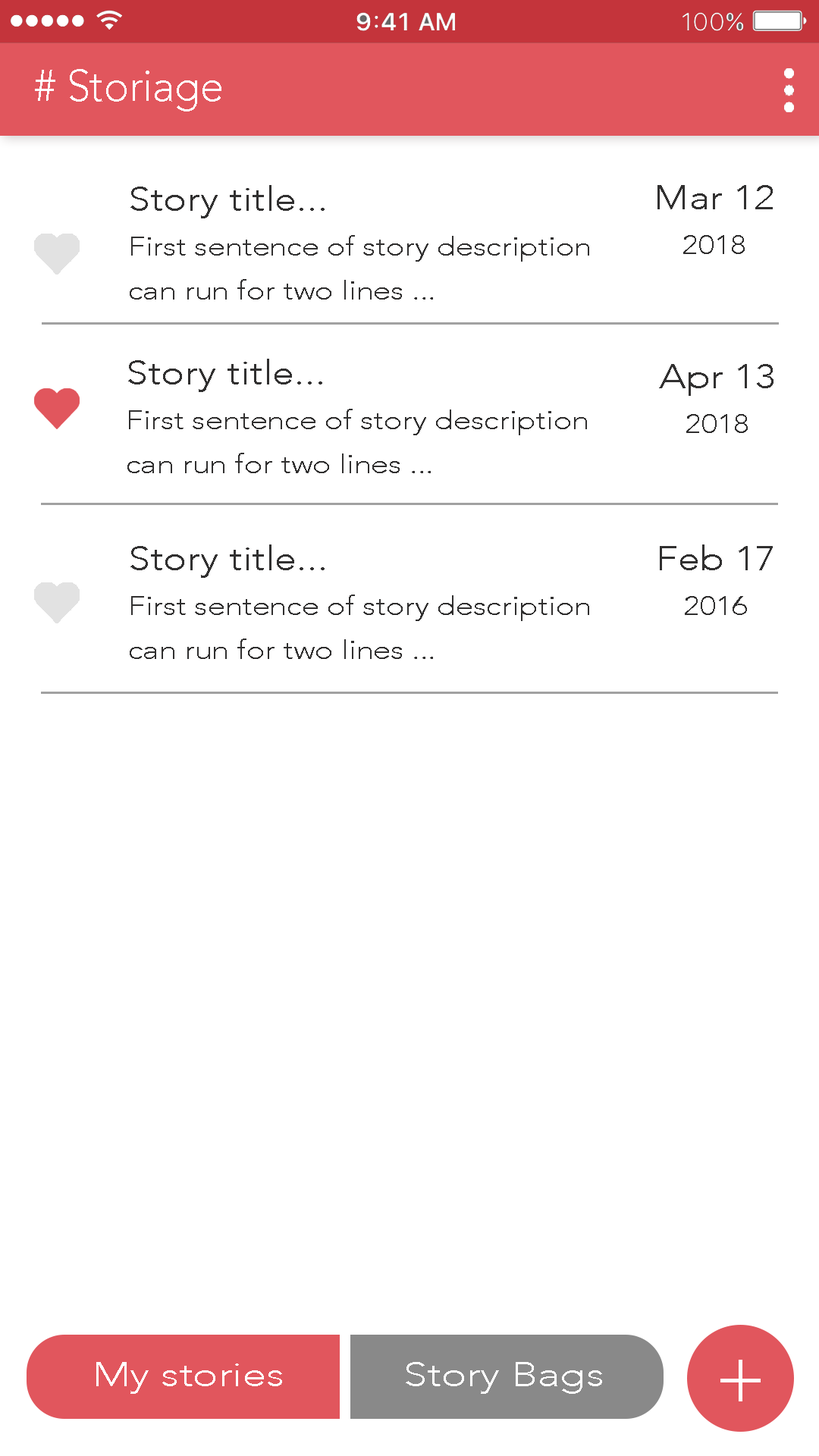
<style>
.page{position:relative;width:819px;height:1456px;background:#ffffff}
.page>*{position:absolute;margin:0}
.t1{font:44px "Avenir-Light";color:#ffffff;scale:0.95 1}
.t2{font:26.5px "Avenir-Light";color:#313030;scale:1.17 1}
.t3{font:34.1px "Avenir-Light";color:#313030;scale:1.17 1}
</style>
<div class="page">
<p class="t1" style="left:35px;top:69px;width:186px;height:42px"># Storiage</p>
<p class="t2" style="left:130px;top:185px;width:459px;height:115px"><span class="t3">Story title...<br></span>First sentence of story description<br>can run for two lines ...</p>
<p class="t3" style="left:657px;top:185px;width:116px;height:69px;text-align:center">Mar 12<br><span class="t2">2018</span></p>
<p class="t2" style="left:127px;top:359px;width:460px;height:114px"><span class="t3">Story title...<br></span>First sentence of story description<br>can run for two lines ...</p>
<p class="t3" style="left:659px;top:364px;width:114px;height:69px;text-align:center">Apr 13<br><span class="t2">2018</span></p>
<p class="t2" style="left:130px;top:544px;width:459px;height:115px"><span class="t3">Story title...<br></span>First sentence of story description<br>can run for two lines ...</p>
<p class="t3" style="left:660px;top:544px;width:113px;height:71px;text-align:center">Feb 17<br><span class="t2">2016</span></p>
</div>
